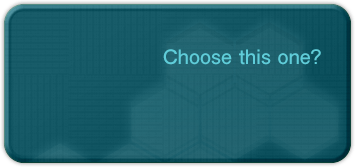
<style>
.page{position:relative;width:355px;height:167px}
.page>*{position:absolute;margin:0}
.t1{font:20px "FutoGoB101Pr5-Bold";color:#5fcdd9}
</style>
<div class="page">
<p class="t1" style="left:163px;top:49px;width:158px;height:16px">Choose this one?</p>
</div>
